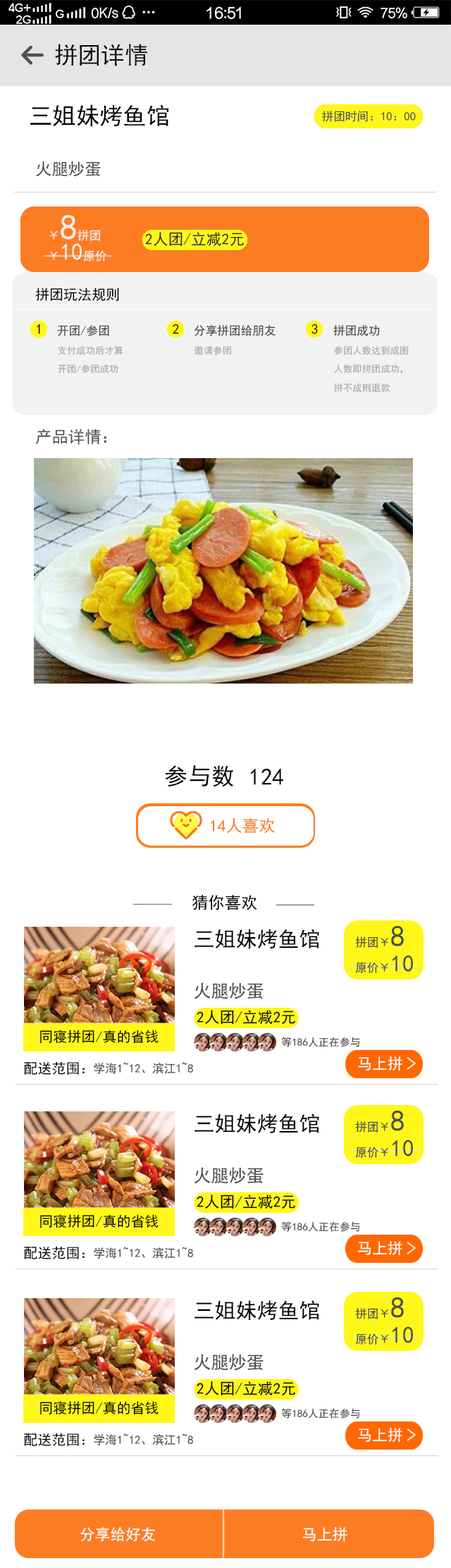
<style>
.page{position:relative;width:451px;height:1568px;background:#ffffff}
.page>*{position:absolute;margin:0}
.t1{font:23.5px "SimHei";letter-spacing:0.002em;color:#0e0e0e}
.t2{font:23.5px "SimHei";letter-spacing:0.002em;color:#000000}
.t3{font:11.7px "SimHei";letter-spacing:0.002em;color:#535353}
.t4{font:16.4px "SimHei";letter-spacing:0.002em;color:#4b4b4b}
.t5{font:11.7px/30.4px "SimHei";letter-spacing:0.002em;color:#efefef}
.t6{font:35.2px/30.4px "SimHei";letter-spacing:0.002em;color:#efefef}
.t7{font:23.5px/30.4px "SimHei";letter-spacing:0.002em;color:#efefef}
.t8{font:15.3px "SimHei";letter-spacing:0.002em;color:#2f2f2f}
.t9{font:14.1px "SimHei";letter-spacing:0.002em;color:#000000}
.t10{font:8.5px "SimHei";letter-spacing:0.002em;color:#1b1b1b}
.t11{font:11.7px "SimHei";letter-spacing:0.002em;color:#4b4b4b}
.t12{font:9.4px/18.7px "SimHei";letter-spacing:0.002em;color:#a9a9a9}
.t13{font:9.4px "SimHei";letter-spacing:0.002em;color:#a9a9a9}
.t14{font:16.4px "SimHei";letter-spacing:0.002em;color:#fc7b24}
.t15{font:16.4px "SimHei";letter-spacing:0.002em;color:#010101}
.t16{font:21.1px "SimHei";letter-spacing:0.002em;color:#010101}
.t17{font:11.7px/30.4px "SimHei";letter-spacing:0.002em;color:#4b4b4b}
.t18{font:29.4px/30.4px "SimHei";letter-spacing:0.002em;color:#4b4b4b}
.t19{font:23.5px/30.4px "SimHei";letter-spacing:0.002em;color:#4b4b4b}
.t20{font:17.6px "SimHei";letter-spacing:0.002em;color:#4b4b4b}
.t21{font:15.3px "SimHei";letter-spacing:0.002em;color:#000000}
.t22{font:10.6px "SimHei";letter-spacing:0.002em;color:#4b4b4b}
.t23{font:14.1px "SimHei";letter-spacing:0.002em;color:#010101}
.t24{font:15.3px "SimHei";letter-spacing:0.002em;color:#ffffff}
.t25{font:15.3px "SimHei";letter-spacing:0.002em;color:#fefefe}
</style>
<div class="page">
<p class="t1" style="left:55px;top:44px;width:92px;height:22px">拼团详情</p>
<p class="t2" style="left:30px;top:104px;width:138px;height:23px">三姐妹烤鱼馆</p>
<p class="t3" style="left:322px;top:111px;width:94px;height:11px">拼团时间：10：00</p>
<p class="t4" style="left:36px;top:161px;width:65px;height:16px">火腿炒蛋</p>
<p class="t5" style="left:50px;top:215px;width:56px;height:46px">￥<span class="t6">8</span>拼团<br>￥<span class="t7">10</span>原价</p>
<p class="t8" style="left:145px;top:232px;width:99px;height:15px">2人团/立减2元</p>
<p class="t9" style="left:35px;top:288px;width:84px;height:14px">拼团玩法规则</p>
<p class="t10" style="left:37px;top:324px;width:3px;height:10px">1</p>
<p class="t11" style="left:57px;top:325px;width:52px;height:11px">开团/参团</p>
<p class="t10" style="left:173px;top:323px;width:6px;height:11px">2</p>
<p class="t11" style="left:194px;top:325px;width:82px;height:11px">分享拼团给朋友</p>
<p class="t10" style="left:311px;top:323px;width:7px;height:11px">3</p>
<p class="t11" style="left:333px;top:325px;width:47px;height:11px">拼团成功</p>
<p class="t12" style="left:58px;top:346px;width:65px;height:28px">支付成功后才算<br>开团/参团成功</p>
<p class="t13" style="left:194px;top:346px;width:37px;height:9px">邀请参团</p>
<p class="t12" style="left:334px;top:346px;width:75px;height:47px">参团人数达到成图<br>人数即拼团成功，<br>拼不成则退款</p>
<p class="t4" style="left:35px;top:428px;width:71px;height:17px">产品详情：</p>
<p class="t2" style="left:165px;top:765px;width:69px;height:22px">参与数</p>
<p class="t2" style="left:251px;top:768px;width:32px;height:17px">124</p>
<p class="t14" style="left:210px;top:817px;width:65px;height:17px">14人喜欢</p>
<p class="t15" style="left:192px;top:894px;width:65px;height:16px">猜你喜欢</p>
<p class="t16" style="left:195px;top:929px;width:124px;height:20px">三姐妹烤鱼馆</p>
<p class="t17" style="left:355px;top:926px;width:58px;height:47px">拼团￥<span class="t18">8<br></span>原价￥<span class="t19">10</span></p>
<p class="t20" style="left:194px;top:982px;width:70px;height:17px">火腿炒蛋</p>
<p class="t21" style="left:197px;top:1010px;width:98px;height:15px">2人团/立减2元</p>
<p class="t9" style="left:39px;top:1030px;width:120px;height:14px">同寝拼团/真的省钱</p>
<p class="t22" style="left:281px;top:1037px;width:79px;height:10px">等186人正在参与</p>
<p class="t23" style="left:24px;top:1061px;width:61px;height:14px">配送范围：</p>
<p class="t24" style="left:358px;top:1056px;width:44px;height:15px">马上拼</p>
<p class="t11" style="left:94px;top:1062px;width:99px;height:12px">学海1~12、滨江1~8</p>
<p class="t16" style="left:195px;top:1113px;width:124px;height:20px">三姐妹烤鱼馆</p>
<p class="t17" style="left:355px;top:1111px;width:58px;height:47px">拼团￥<span class="t18">8<br></span>原价￥<span class="t19">10</span></p>
<p class="t20" style="left:194px;top:1167px;width:70px;height:17px">火腿炒蛋</p>
<p class="t21" style="left:197px;top:1194px;width:98px;height:15px">2人团/立减2元</p>
<p class="t9" style="left:39px;top:1214px;width:120px;height:14px">同寝拼团/真的省钱</p>
<p class="t22" style="left:281px;top:1221px;width:79px;height:11px">等186人正在参与</p>
<p class="t25" style="left:358px;top:1241px;width:44px;height:15px">马上拼</p>
<p class="t23" style="left:24px;top:1246px;width:61px;height:14px">配送范围：</p>
<p class="t11" style="left:94px;top:1247px;width:99px;height:12px">学海1~12、滨江1~8</p>
<p class="t16" style="left:195px;top:1300px;width:124px;height:20px">三姐妹烤鱼馆</p>
<p class="t17" style="left:355px;top:1297px;width:58px;height:48px">拼团￥<span class="t18">8<br></span>原价￥<span class="t19">10</span></p>
<p class="t20" style="left:194px;top:1354px;width:70px;height:17px">火腿炒蛋</p>
<p class="t21" style="left:197px;top:1381px;width:98px;height:15px">2人团/立减2元</p>
<p class="t9" style="left:39px;top:1401px;width:120px;height:14px">同寝拼团/真的省钱</p>
<p class="t22" style="left:281px;top:1408px;width:79px;height:11px">等186人正在参与</p>
<p class="t23" style="left:24px;top:1433px;width:61px;height:14px">配送范围：</p>
<p class="t11" style="left:94px;top:1433px;width:99px;height:12px">学海1~12、滨江1~8</p>
<p class="t25" style="left:358px;top:1428px;width:44px;height:15px">马上拼</p>
<p class="t24" style="left:80px;top:1527px;width:75px;height:15px">分享给好友</p>
<p class="t24" style="left:302px;top:1527px;width:45px;height:15px">马上拼</p>
</div>
